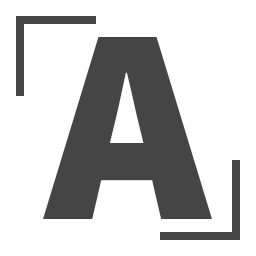
<style>
.page{position:relative;width:256px;height:256px;background:#ffffff}
.page>*{position:absolute;margin:0}
.t1{font:280px "SourceSans3-Black";color:#454545}
</style>
<div class="page">
<p class="t1" style="left:43px;top:37px;width:169px;height:182px">A</p>
</div>
